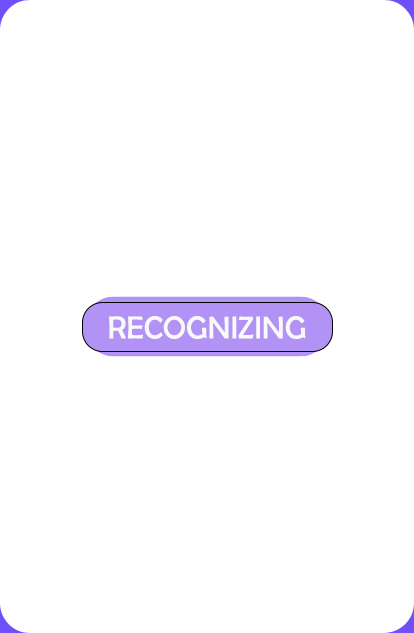
<style>
.page{position:relative;width:414px;height:633px;background:#ffffff}
.page>*{position:absolute;margin:0}
.t1{font:32px "BerlinSansFB-Reg";color:#f9f9f9}
</style>
<div class="page">
<p class="t1" style="left:109px;top:316px;width:197px;height:23px">RECOGNIZING</p>
</div>
